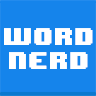
<style>
.page{position:relative;width:96px;height:96px;background:#1584eb}
.page>*{position:absolute;margin:0}
.t1{font:20px/24px "8BITWONDERNominal";letter-spacing:0.025em;color:#ffffff}
</style>
<div class="page">
<p class="t1" style="left:4px;top:28px;width:89px;height:41px;text-align:center">word<br>nerd</p>
<p class="t1" style="left:4px;top:28px;width:89px;height:41px;text-align:center">word<br>nerd</p>
</div>
